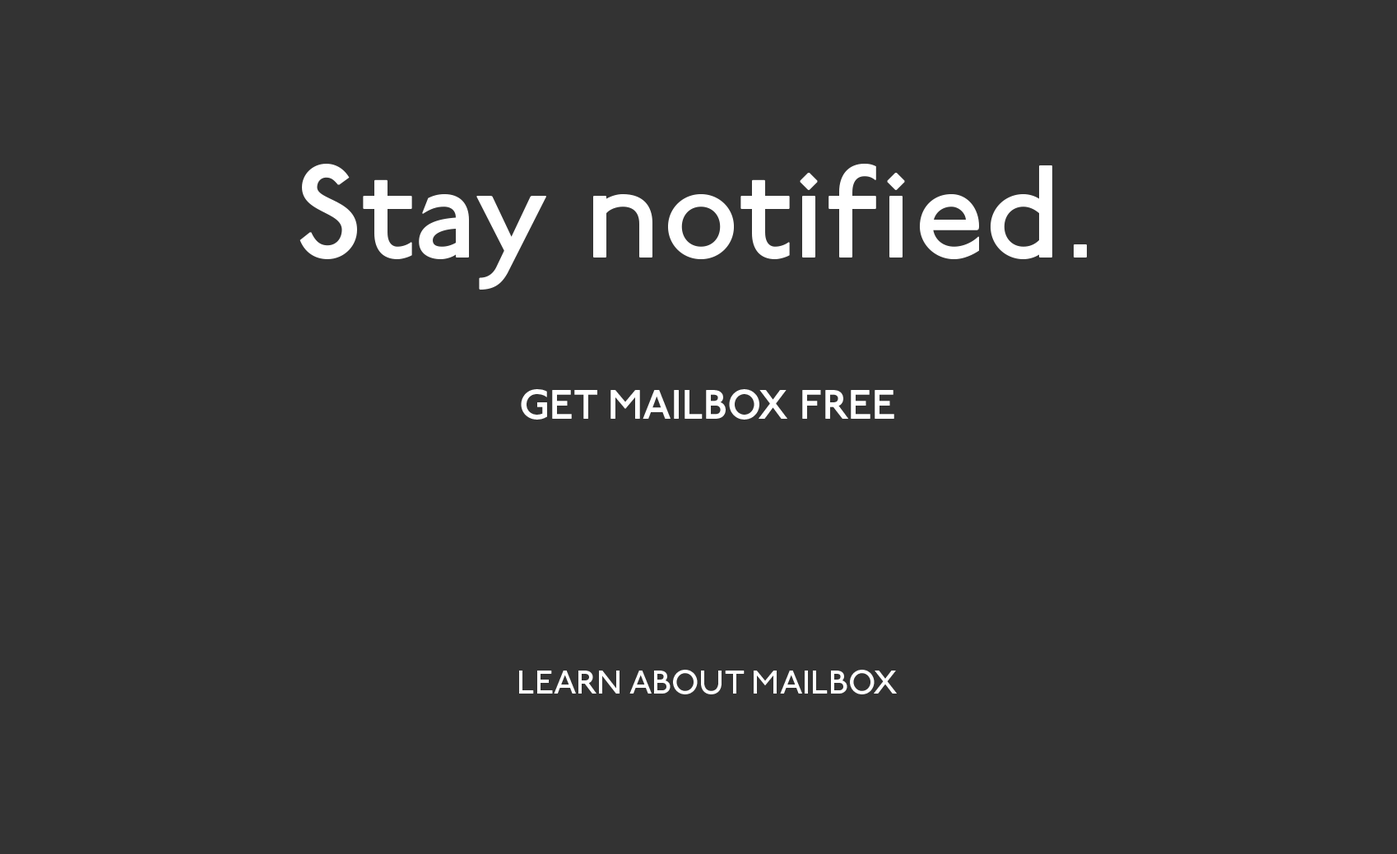
<style>
.page{position:relative;width:1397px;height:854px;background:#333333}
.page>*{position:absolute;margin:0}
.t1{font:131.6px "P22Underground-Medium";color:#ffffff}
.t2{font:41.1px "P22Underground-Demi";color:#ffffff}
.t3{font:32.9px "P22Underground-Medium";color:#ffffff}
</style>
<div class="page">
<p class="t1" style="left:299px;top:164px;width:788px;height:126px">Stay notified.</p>
<p class="t2" style="left:521px;top:389px;width:373px;height:30px">GET MAILBOX FREE</p>
<p class="t3" style="left:519px;top:670px;width:378px;height:24px">LEARN ABOUT MAILBOX</p>
</div>
